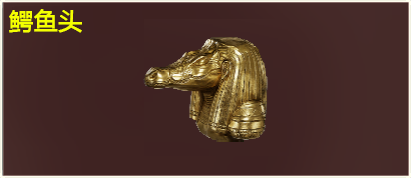
<style>
.page{position:relative;width:411px;height:178px}
.page>*{position:absolute;margin:0}
.t1{font:24px "MicrosoftYaHeiUI";color:#f4ff00;font-weight:bold}
</style>
<div class="page">
<p class="t1" style="left:9px;top:9px;width:73px;height:24px">鳄鱼头</p>
</div>
